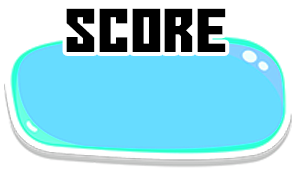
<style>
.page{position:relative;width:300px;height:170px;background:#67dcff}
.page>*{position:absolute;margin:0}
.t1{font:60.4px "No-Continue";color:#000000;scale:1.07 1}
</style>
<div class="page">
<p class="t1" style="left:66px;top:8px;width:160px;height:44px">SCORE</p>
</div>
